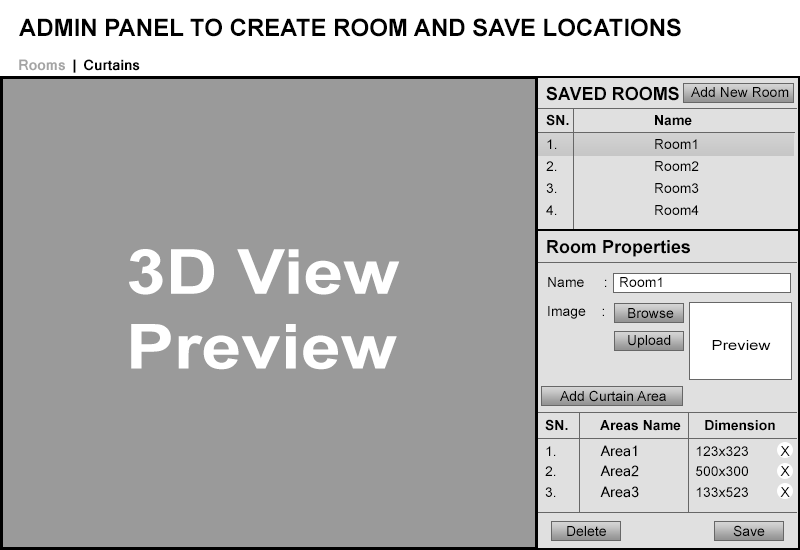
<style>
.page{position:relative;width:800px;height:550px;background:#9a9a9a}
.page>*{position:absolute;margin:0}
.t1{font:24px "Arial-BoldMT";color:#000000}
.t2{font:14px "Mangal-Bold";color:#000000}
.t3{font:14px "Mangal-Bold";color:#a4a4a4}
.t4{font:18px "Arial-BoldMT";color:#000000}
.t5{font:14px "ArialMT";color:#000000}
.t6{font:14px "Arial-BoldMT";color:#000000}
.t7{font:62.3px "Arial-BoldMT";color:#ffffff;scale:1.15 1}
.t8{font:14px "ArialMT";color:#000000;scale:1.18 1}
.t9{font:14px "Mangal";color:#000000}
</style>
<div class="page">
<p class="t1" style="left:19px;top:18px;width:662px;height:19px">ADMIN PANEL TO CREATE ROOM AND SAVE LOCATIONS</p>
<p class="t2" style="left:19px;top:59px;width:121px;height:14px"><span class="t3">Rooms</span> | Curtains</p>
<p class="t4" style="left:546px;top:86px;width:133px;height:15px">SAVED ROOMS</p>
<p class="t5" style="left:691px;top:87px;width:98px;height:10px">Add New Room</p>
<p class="t6" style="left:546px;top:114px;width:146px;height:12px">SN.   Name</p>
<p class="t5" style="left:547px;top:139px;width:150px;height:10px">1.   Room1</p>
<p class="t5" style="left:546px;top:161px;width:153px;height:10px">2.   Room2</p>
<p class="t5" style="left:546px;top:183px;width:153px;height:10px">3.   Room3</p>
<p class="t5" style="left:546px;top:205px;width:153px;height:10px">4.   Room4</p>
<p class="t4" style="left:547px;top:240px;width:143px;height:17px">Room Properties</p>
<p class="t7" style="left:129px;top:249px;width:271px;height:121px">3D View<br>Preview</p>
<p class="t5" style="left:548px;top:277px;width:114px;height:10px">Name     : Room1</p>
<p class="t5" style="left:548px;top:306px;width:56px;height:13px">Image    :</p>
<p class="t5" style="left:628px;top:308px;width:46px;height:10px">Browse</p>
<p class="t5" style="left:628px;top:335px;width:43px;height:13px">Upload</p>
<p class="t8" style="left:712px;top:340px;width:59px;height:10px">Preview</p>
<p class="t5" style="left:560px;top:390px;width:106px;height:12px">Add Curtain Area</p>
<p class="t6" style="left:545px;top:419px;width:230px;height:12px">SN.      Areas Name      Dimension</p>
<p class="t5" style="left:546px;top:445px;width:244px;height:12px">1.      <span class="t9">Area1        </span>123x323      X</p>
<p class="t5" style="left:545px;top:465px;width:245px;height:12px">2.      <span class="t9">Area2        </span>500x300      X</p>
<p class="t5" style="left:545px;top:486px;width:245px;height:12px">3.      <span class="t9">Area3        </span>133x523      X</p>
<p class="t5" style="left:567px;top:526px;width:39px;height:10px">Delete</p>
<p class="t5" style="left:733px;top:525px;width:32px;height:12px">Save</p>
</div>
